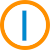
<style>
.page{position:relative;width:50px;height:50px;background:#ffffff}
.page>*{position:absolute;margin:0}
.t1{font:41.7px "ArialMT";color:#008acf}
</style>
<div class="page">
<p class="t1" style="left:22px;top:10px;width:5px;height:31px">I</p>
</div>
